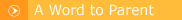
<style>
.page{position:relative;width:182px;height:20px;background:#ffbc3a}
.page>*{position:absolute;margin:0}
.t1{font:14px "Verdana";color:#ffffff}
</style>
<div class="page">
<p class="t1" style="left:34px;top:4px;width:120px;height:12px">A Word to Parent</p>
</div>
